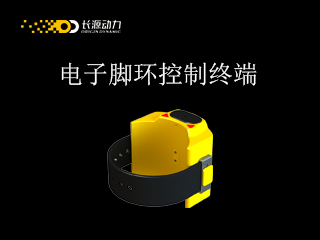
<style>
.page{position:relative;width:320px;height:240px;background:#000000}
.page>*{position:absolute;margin:0}
.t1{font:25px "SimSun";color:#ffffff}
</style>
<div class="page">
<p class="t1" style="left:61px;top:62px;width:196px;height:24px">电子脚环控制终端</p>
</div>
